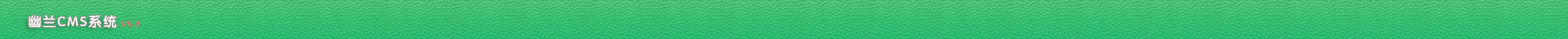
<style>
.page{position:relative;width:1568px;height:39px}
.page>*{position:absolute;margin:0}
.t1{font:13.1px "FZY3JW--GB1-0";letter-spacing:0.2em;color:#ffffff}
.t2{font:7.3px "MicrosoftYaHei";letter-spacing:0.2em;color:#ff6868;font-style:italic}
</style>
<div class="page">
<p class="t1" style="left:29px;top:15px;width:88px;height:13px">幽兰CMS系统</p>
<p class="t2" style="left:122px;top:21px;width:18px;height:7px">V5.0</p>
</div>
